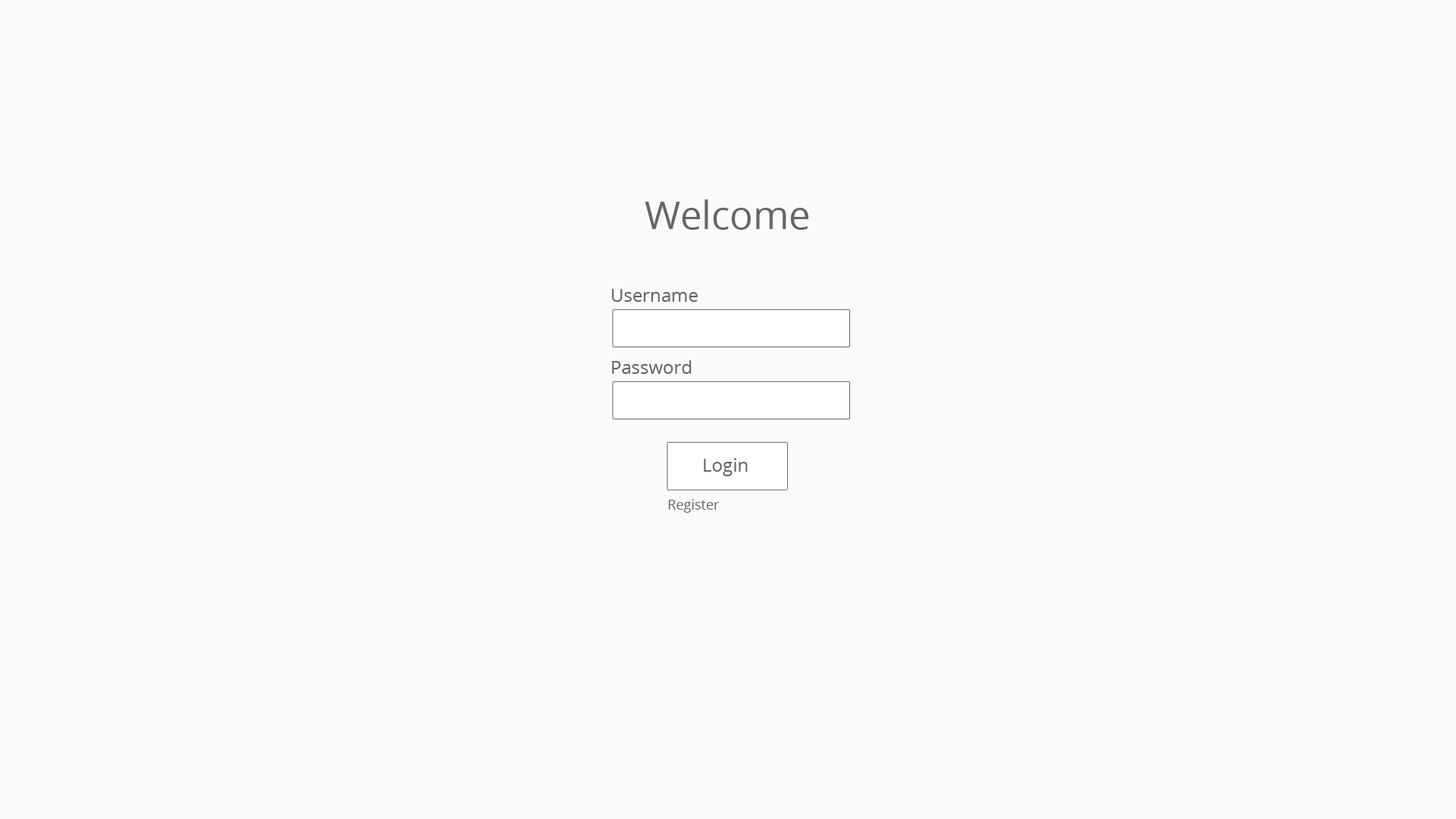
<style>
.page{position:relative;width:1456px;height:819px;background:#faf9fb}
.page>*{position:absolute;margin:0}
.t1{font:38.4px "OpenSans";color:#666666}
.t2{font:18.2px "OpenSans";color:#666666}
.t3{font:13.6px "OpenSans";color:#666666}
</style>
<div class="page">
<p class="t1" style="left:645px;top:199px;width:163px;height:31px">Welcome</p>
<p class="t2" style="left:612px;top:289px;width:86px;height:13px">Username</p>
<p class="t2" style="left:612px;top:360px;width:80px;height:14px">Password</p>
<p class="t2" style="left:704px;top:458px;width:44px;height:18px">Login</p>
<p class="t3" style="left:668px;top:499px;width:52px;height:14px">Register</p>
</div>
